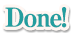
<style>
.page{position:relative;width:71px;height:33px;background:#ffffff}
.page>*{position:absolute;margin:0}
.t1{font:26px "RyuminPro-ExBold";letter-spacing:-0.08em;color:#239e9f;font-weight:bold}
</style>
<div class="page">
<p class="t1" style="left:5px;top:7px;width:62px;height:21px">Done!</p>
</div>
